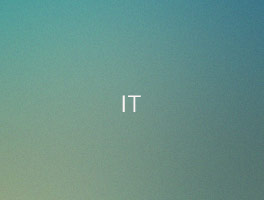
<style>
.page{position:relative;width:264px;height:200px}
.page>*{position:absolute;margin:0}
.t1{font:24px "GujaratiSangamMN";color:#f9f4f4}
</style>
<div class="page">
<p class="t1" style="left:122px;top:95px;width:19px;height:17px">IT</p>
</div>
